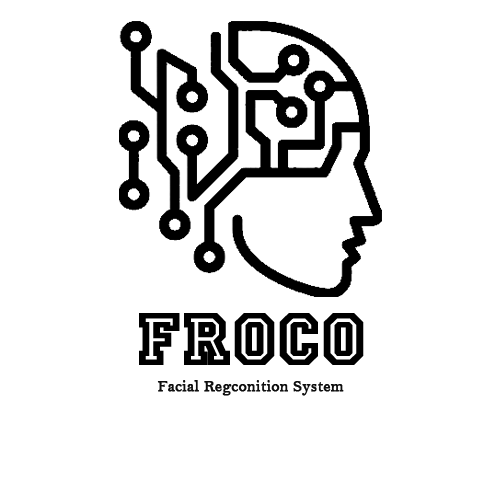
<style>
.page{position:relative;width:500px;height:500px;background:#ffffff}
.page>*{position:absolute;margin:0}
.t1{font:76.3px "Allstar-Regular";letter-spacing:0.005em;color:#000000;font-weight:bold}
.t2{font:16px "BellMT";letter-spacing:0.005em;color:#0e0e0e;font-weight:bold}
</style>
<div class="page">
<p class="t1" style="left:139px;top:313px;width:225px;height:52px">FROCO</p>
<p class="t2" style="left:157px;top:380px;width:187px;height:16px">Facial Regconition System</p>
</div>
